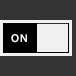
<style>
.page{position:relative;width:76px;height:76px;background:#333333}
.page>*{position:absolute;margin:0}
.t1{font:11px "HelveticaNeue-Bold";letter-spacing:0.025em;color:#f0f0f0}
</style>
<div class="page">
<p class="t1" style="left:11px;top:34px;width:16px;height:9px">ON</p>
</div>
